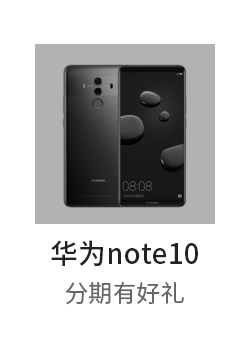
<style>
.page{position:relative;width:250px;height:340px;background:#ffffff}
.page>*{position:absolute;margin:0}
.t1{font:28px "SourceHanSansCN-Medium";color:#222222}
.t2{font:24px "SourceHanSansCN-Regular";color:#666666}
</style>
<div class="page">
<p class="t1" style="left:51px;top:240px;width:147px;height:26px">华为note10</p>
<p class="t2" style="left:65px;top:281px;width:119px;height:24px">分期有好礼</p>
</div>
